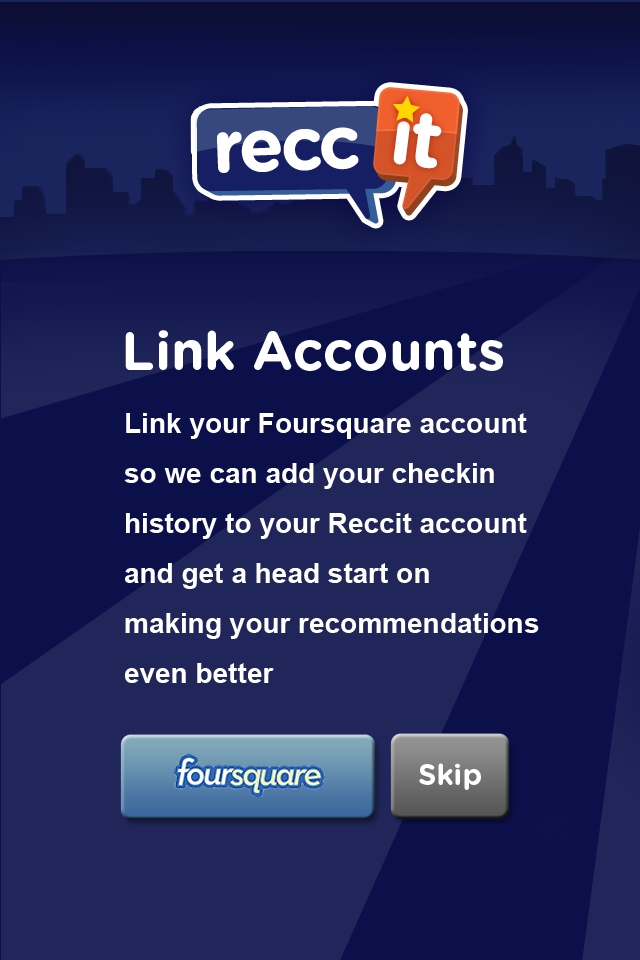
<style>
.page{position:relative;width:640px;height:960px;background:#21265a}
.page>*{position:absolute;margin:0}
.t1{font:53.8px "GothamRounded-Bold";color:#ffffff}
.t2{font:28px/50px "Arial-BoldMT";color:#ffffff}
.t3{font:29px "GothamRounded-Bold";color:#ffffff}
</style>
<div class="page">
<p class="t1" style="left:125px;top:330px;width:378px;height:41px">Link Accounts</p>
<p class="t2" style="left:124px;top:413px;width:415px;height:270px">Link your Foursquare account <br>so we can add your checkin <br>history to your Reccit account and get a head start on <br>making your recommendations even better</p>
<p class="t3" style="left:419px;top:763px;width:62px;height:27px">Skip</p>
</div>
